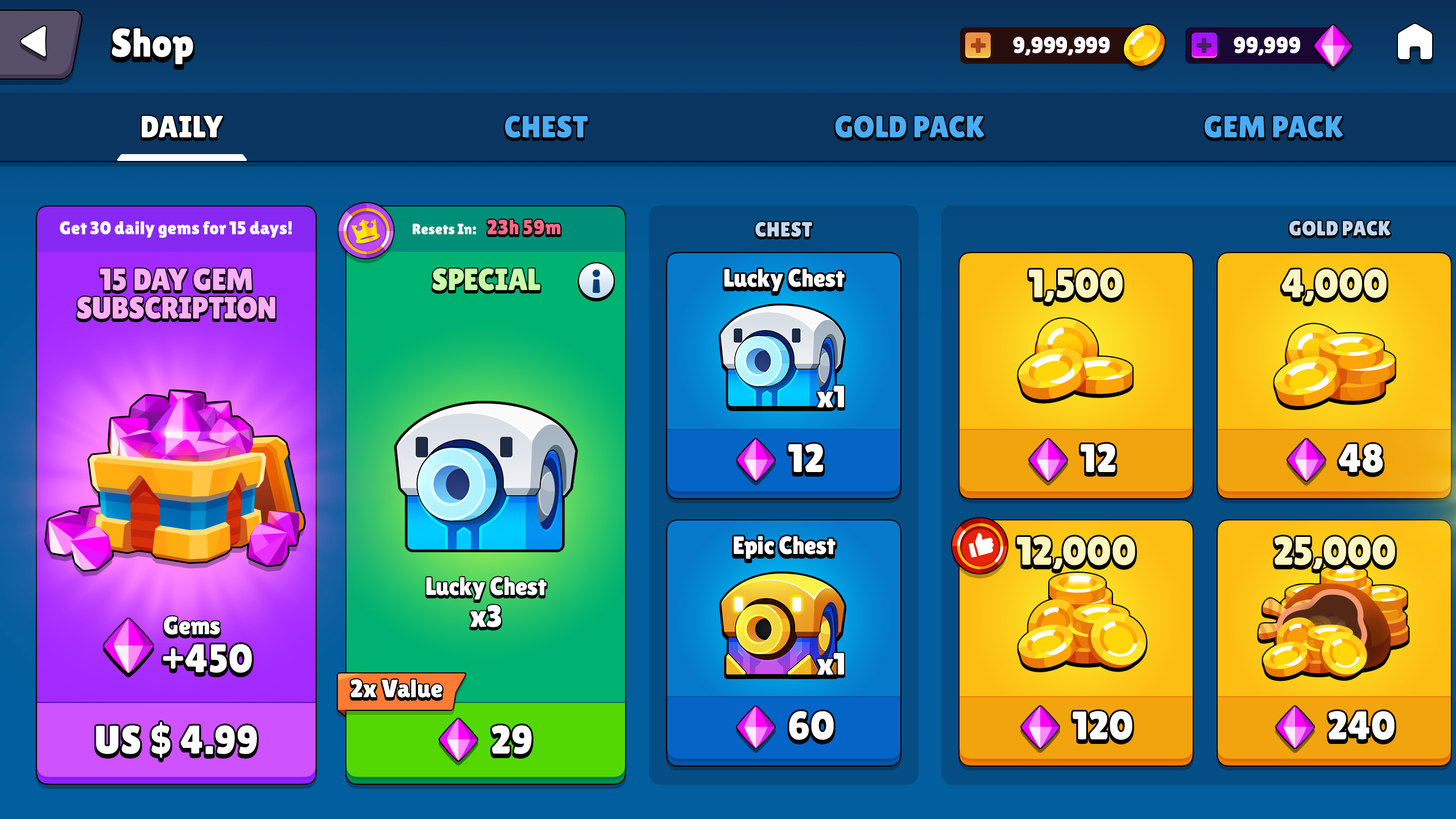
<style>
.page{position:relative;width:1456px;height:819px}
.page>*{position:absolute;margin:0}
.t1{font:39.8px "LilitaOne";color:#ffffff}
.t2{font:22.7px "LilitaOne";letter-spacing:-0.01em;color:#ffffff;text-transform:uppercase}
.t3{font:30.7px "LilitaOne";color:#ffffff;text-transform:uppercase}
.t4{font:30.7px "LilitaOne";color:#4aacf7;text-transform:uppercase}
.t5{font:18.2px "LilitaOne";letter-spacing:-0.01em;color:#ffffff}
.t6{font:20.5px "LilitaOne";letter-spacing:-0.01em;color:#ff6788}
.t7{font:20.5px "LilitaOne";letter-spacing:-0.01em;color:#c3d7ef;text-transform:uppercase}
.t8{font:14.8px "LilitaOne";letter-spacing:-0.01em;color:#ffffff}
.t9{font:30.7px/28.4px "LilitaOne";color:#ffaef8;text-transform:uppercase}
.t10{font:30.7px "LilitaOne";color:#c9ffa9;text-transform:uppercase}
.t11{font:25px "LilitaOne";color:#ffffff}
.t12{font:30.7px "LilitaOne";color:#ffffff}
.t13{font:39.8px "LilitaOne";letter-spacing:0.02em;color:#ffffff}
.t14{font:25px/31.8px "LilitaOne";color:#ffffff}
.t15{font:30.7px/31.8px "LilitaOne";color:#ffffff}
</style>
<div class="page">
<p class="t1" style="left:111px;top:28px;width:82px;height:36px">Shop</p>
<p class="t2" style="left:1013px;top:36px;width:97px;height:20px">9,999,999</p>
<p class="t2" style="left:1234px;top:36px;width:66px;height:20px">99,999</p>
<p class="t3" style="left:142px;top:115px;width:82px;height:23px">Daily</p>
<p class="t4" style="left:504px;top:115px;width:84px;height:23px">Chest</p>
<p class="t4" style="left:835px;top:115px;width:149px;height:23px">Gold Pack</p>
<p class="t4" style="left:1204px;top:115px;width:139px;height:23px">Gem pack</p>
<p class="t5" style="left:60px;top:221px;width:232px;height:17px">Get 30 daily gems for 15 days!</p>
<p class="t6" style="left:487px;top:220px;width:74px;height:14px">23h 59m</p>
<p class="t7" style="left:755px;top:222px;width:57px;height:15px">Chest</p>
<p class="t8" style="left:412px;top:224px;width:64px;height:10px">Resets In:</p>
<p class="t9" style="left:77px;top:268px;width:198px;height:51px;text-align:center">15 day gem<br>subscription</p>
<p class="t10" style="left:432px;top:268px;width:108px;height:23px">Special</p>
<p class="t11" style="left:724px;top:268px;width:121px;height:23px">Lucky Chest</p>
<p class="t12" style="left:817px;top:386px;width:27px;height:22px">x1</p>
<p class="t13" style="left:788px;top:444px;width:36px;height:28px">12</p>
<p class="t11" style="left:734px;top:536px;width:101px;height:23px">Epic Chest</p>
<p class="t14" style="left:426px;top:577px;width:121px;height:50px;text-align:center">Lucky Chest<br><span class="t15">x3</span></p>
<p class="t11" style="left:164px;top:616px;width:56px;height:19px">Gems</p>
<p class="t13" style="left:163px;top:644px;width:89px;height:29px">+450</p>
<p class="t12" style="left:817px;top:653px;width:27px;height:22px">x1</p>
<p class="t11" style="left:351px;top:679px;width:91px;height:19px">2x Value</p>
<p class="t13" style="left:789px;top:711px;width:45px;height:29px">60</p>
<p class="t13" style="left:96px;top:722px;width:161px;height:36px">US $ 4.99</p>
<p class="t13" style="left:492px;top:725px;width:40px;height:29px">29</p>
</div>
